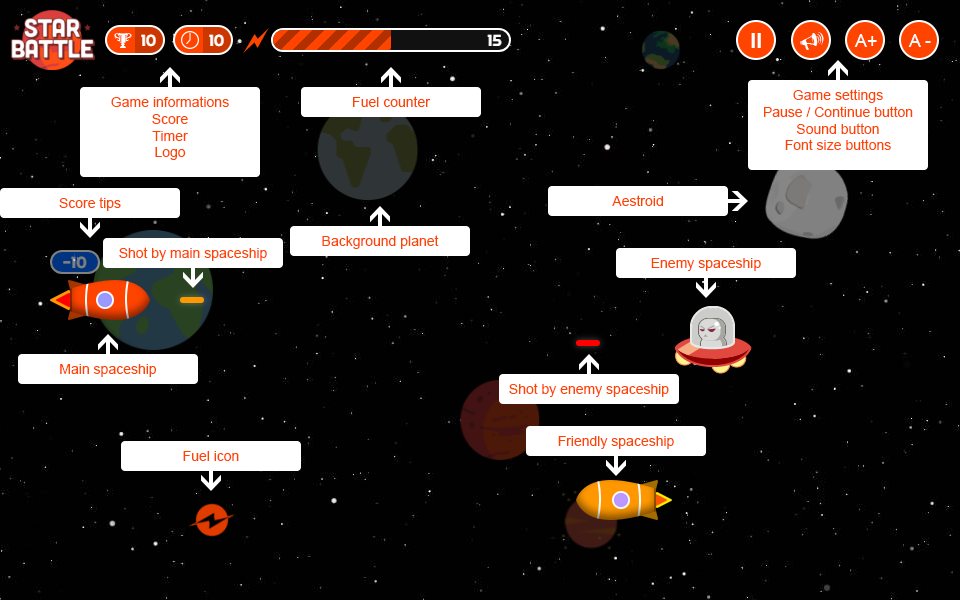
<style>
.page{position:relative;width:960px;height:600px;background:#010101}
.page>*{position:absolute;margin:0}
.t1{font:14px "ArialMT";color:#ff4400}
</style>
<div class="page">
<p class="t1" style="left:764px;top:89px;width:149px;height:61px;text-align:center">Game settings<br>Pause / Continue button<br>Sound button<br>Font size buttons</p>
<p class="t1" style="left:111px;top:96px;width:118px;height:64px;text-align:center">Game informations<br>Score<br>Timer<br>Logo</p>
<p class="t1" style="left:353px;top:96px;width:78px;height:11px">Fuel counter</p>
<p class="t1" style="left:59px;top:197px;width:62px;height:14px">Score tips</p>
<p class="t1" style="left:612px;top:195px;width:51px;height:11px">Aestroid</p>
<p class="t1" style="left:322px;top:235px;width:117px;height:14px">Background planet</p>
<p class="t1" style="left:119px;top:247px;width:148px;height:14px">Shot by main spaceship</p>
<p class="t1" style="left:651px;top:258px;width:110px;height:13px">Enemy spaceship</p>
<p class="t1" style="left:60px;top:364px;width:97px;height:13px">Main spaceship</p>
<p class="t1" style="left:509px;top:383px;width:160px;height:14px">Shot by enemy spaceship</p>
<p class="t1" style="left:558px;top:436px;width:116px;height:13px">Friendly spaceship</p>
<p class="t1" style="left:183px;top:451px;width:56px;height:10px">Fuel icon</p>
</div>
